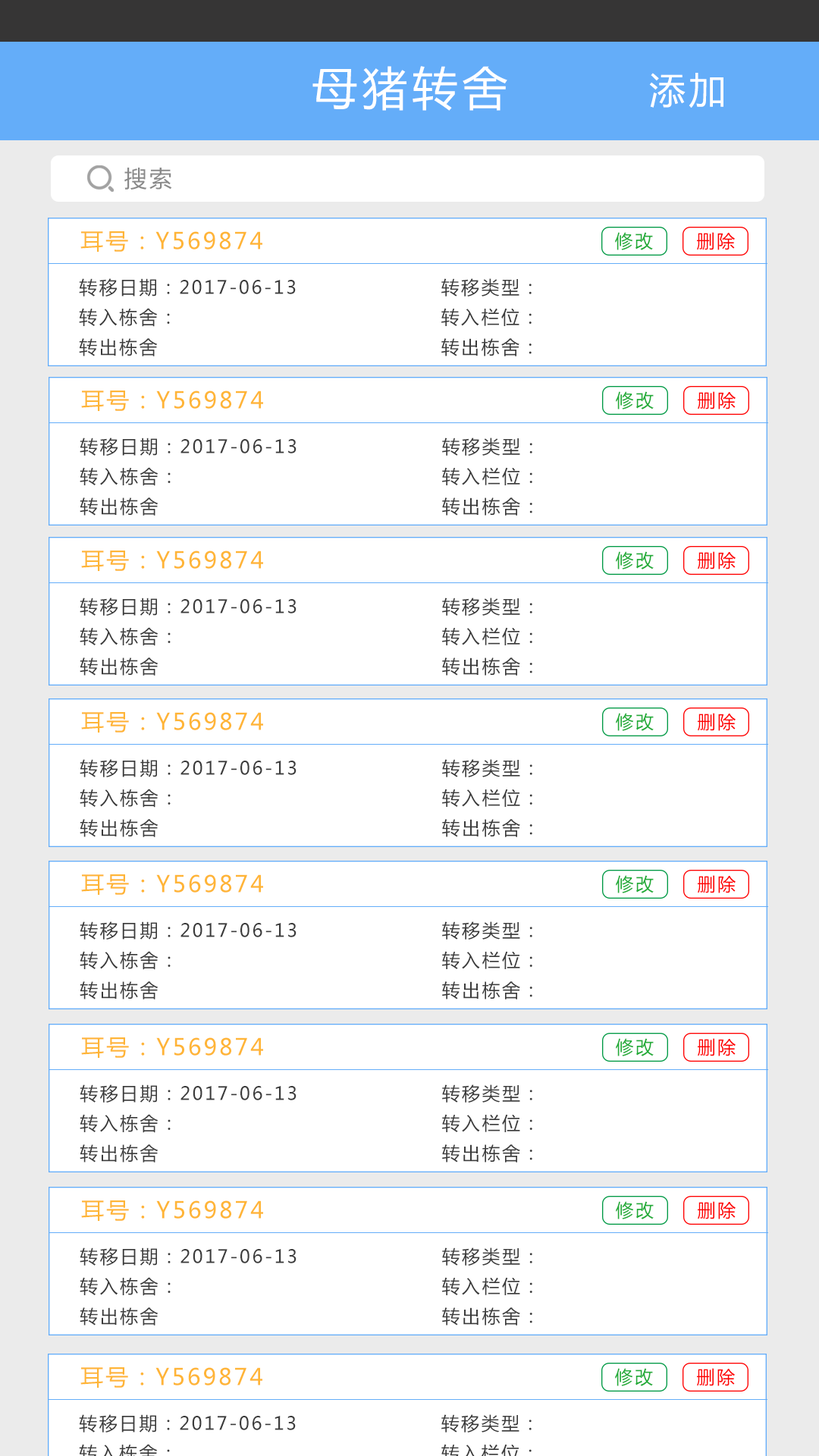
<style>
.page{position:relative;width:819px;height:1456px;background:#ffffff}
.page>*{position:absolute;margin:0}
.t1{font:45.5px "MicrosoftYaHei";letter-spacing:0.1em;color:#ffffff}
.t2{font:36.4px "MicrosoftYaHei";letter-spacing:0.1em;color:#ffffff}
.t3{font:22.7px "MicrosoftYaHei";letter-spacing:0.1em;color:#898989}
.t4{font:22.7px "MicrosoftYaHei";letter-spacing:0.1em;color:#ffb537}
.t5{font:18.2px "MicrosoftYaHei";letter-spacing:0.1em;color:#22ac38}
.t6{font:18.2px "MicrosoftYaHei";letter-spacing:0.1em;color:#fe0000}
.t7{font:18.2px "MicrosoftYaHei";letter-spacing:0.1em;color:#3b3b3b}
</style>
<div class="page">
<p class="t1" style="left:312px;top:66px;width:195px;height:45px">母猪转舍</p>
<p class="t2" style="left:649px;top:73px;width:74px;height:35px">添加</p>
<p class="t3" style="left:124px;top:168px;width:48px;height:22px">搜索</p>
<p class="t4" style="left:80px;top:231px;width:182px;height:21px">耳号：Y569874</p>
<p class="t5" style="left:615px;top:232px;width:38px;height:18px">修改</p>
<p class="t6" style="left:697px;top:232px;width:38px;height:18px">删除</p>
<p class="t7" style="left:79px;top:278px;width:217px;height:19px">转移日期：2017-06-13</p>
<p class="t7" style="left:441px;top:278px;width:91px;height:19px">转移类型：</p>
<p class="t7" style="left:79px;top:308px;width:91px;height:19px">转入栋舍：</p>
<p class="t7" style="left:441px;top:308px;width:91px;height:18px">转入栏位：</p>
<p class="t7" style="left:79px;top:338px;width:79px;height:18px">转出栋舍</p>
<p class="t7" style="left:441px;top:338px;width:91px;height:18px">转出栋舍：</p>
<p class="t4" style="left:81px;top:391px;width:182px;height:20px">耳号：Y569874</p>
<p class="t5" style="left:616px;top:391px;width:38px;height:18px">修改</p>
<p class="t6" style="left:698px;top:391px;width:38px;height:18px">删除</p>
<p class="t7" style="left:80px;top:438px;width:217px;height:18px">转移日期：2017-06-13</p>
<p class="t7" style="left:442px;top:438px;width:90px;height:18px">转移类型：</p>
<p class="t7" style="left:80px;top:467px;width:91px;height:19px">转入栋舍：</p>
<p class="t7" style="left:442px;top:467px;width:90px;height:18px">转入栏位：</p>
<p class="t7" style="left:80px;top:497px;width:78px;height:19px">转出栋舍</p>
<p class="t7" style="left:442px;top:497px;width:90px;height:19px">转出栋舍：</p>
<p class="t4" style="left:81px;top:551px;width:182px;height:20px">耳号：Y569874</p>
<p class="t5" style="left:616px;top:551px;width:38px;height:19px">修改</p>
<p class="t6" style="left:698px;top:551px;width:38px;height:19px">删除</p>
<p class="t7" style="left:80px;top:598px;width:217px;height:18px">转移日期：2017-06-13</p>
<p class="t7" style="left:442px;top:598px;width:90px;height:18px">转移类型：</p>
<p class="t7" style="left:80px;top:627px;width:91px;height:19px">转入栋舍：</p>
<p class="t7" style="left:442px;top:627px;width:90px;height:18px">转入栏位：</p>
<p class="t7" style="left:80px;top:657px;width:78px;height:19px">转出栋舍</p>
<p class="t7" style="left:442px;top:657px;width:90px;height:19px">转出栋舍：</p>
<p class="t4" style="left:81px;top:712px;width:182px;height:21px">耳号：Y569874</p>
<p class="t5" style="left:616px;top:713px;width:38px;height:18px">修改</p>
<p class="t6" style="left:698px;top:713px;width:38px;height:18px">删除</p>
<p class="t7" style="left:80px;top:759px;width:217px;height:18px">转移日期：2017-06-13</p>
<p class="t7" style="left:442px;top:759px;width:90px;height:18px">转移类型：</p>
<p class="t7" style="left:80px;top:789px;width:91px;height:19px">转入栋舍：</p>
<p class="t7" style="left:442px;top:789px;width:90px;height:18px">转入栏位：</p>
<p class="t7" style="left:80px;top:819px;width:78px;height:18px">转出栋舍</p>
<p class="t7" style="left:442px;top:819px;width:90px;height:18px">转出栋舍：</p>
<p class="t4" style="left:81px;top:874px;width:182px;height:21px">耳号：Y569874</p>
<p class="t5" style="left:616px;top:875px;width:38px;height:18px">修改</p>
<p class="t6" style="left:698px;top:875px;width:38px;height:18px">删除</p>
<p class="t7" style="left:80px;top:921px;width:217px;height:19px">转移日期：2017-06-13</p>
<p class="t7" style="left:442px;top:921px;width:90px;height:19px">转移类型：</p>
<p class="t7" style="left:80px;top:951px;width:91px;height:19px">转入栋舍：</p>
<p class="t7" style="left:442px;top:951px;width:90px;height:18px">转入栏位：</p>
<p class="t7" style="left:80px;top:981px;width:78px;height:18px">转出栋舍</p>
<p class="t7" style="left:442px;top:981px;width:90px;height:18px">转出栋舍：</p>
<p class="t4" style="left:81px;top:1037px;width:182px;height:21px">耳号：Y569874</p>
<p class="t5" style="left:616px;top:1038px;width:38px;height:18px">修改</p>
<p class="t6" style="left:698px;top:1038px;width:38px;height:18px">删除</p>
<p class="t7" style="left:80px;top:1084px;width:217px;height:19px">转移日期：2017-06-13</p>
<p class="t7" style="left:442px;top:1084px;width:90px;height:19px">转移类型：</p>
<p class="t7" style="left:80px;top:1114px;width:91px;height:19px">转入栋舍：</p>
<p class="t7" style="left:442px;top:1114px;width:90px;height:18px">转入栏位：</p>
<p class="t7" style="left:80px;top:1144px;width:78px;height:19px">转出栋舍</p>
<p class="t7" style="left:442px;top:1144px;width:90px;height:19px">转出栋舍：</p>
<p class="t4" style="left:81px;top:1200px;width:182px;height:21px">耳号：Y569874</p>
<p class="t5" style="left:616px;top:1201px;width:38px;height:18px">修改</p>
<p class="t6" style="left:698px;top:1201px;width:38px;height:18px">删除</p>
<p class="t7" style="left:80px;top:1247px;width:217px;height:19px">转移日期：2017-06-13</p>
<p class="t7" style="left:442px;top:1247px;width:90px;height:19px">转移类型：</p>
<p class="t7" style="left:80px;top:1277px;width:91px;height:19px">转入栋舍：</p>
<p class="t7" style="left:442px;top:1277px;width:90px;height:18px">转入栏位：</p>
<p class="t7" style="left:80px;top:1307px;width:78px;height:19px">转出栋舍</p>
<p class="t7" style="left:442px;top:1307px;width:90px;height:19px">转出栋舍：</p>
<p class="t4" style="left:80px;top:1367px;width:182px;height:21px">耳号：Y569874</p>
<p class="t5" style="left:615px;top:1368px;width:38px;height:18px">修改</p>
<p class="t6" style="left:697px;top:1368px;width:38px;height:18px">删除</p>
<p class="t7" style="left:79px;top:1414px;width:217px;height:18px">转移日期：2017-06-13</p>
<p class="t7" style="left:441px;top:1414px;width:91px;height:18px">转移类型：</p>
</div>
